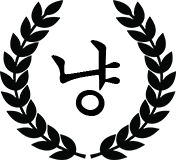
<style>
.page{position:relative;width:176px;height:160px;background:#ffffff}
.page>*{position:absolute;margin:0}
.t1{font:90.3px "JCkg";color:#000000}
</style>
<div class="page">
<p class="t1" style="left:51px;top:40px;width:69px;height:76px">냥</p>
</div>
